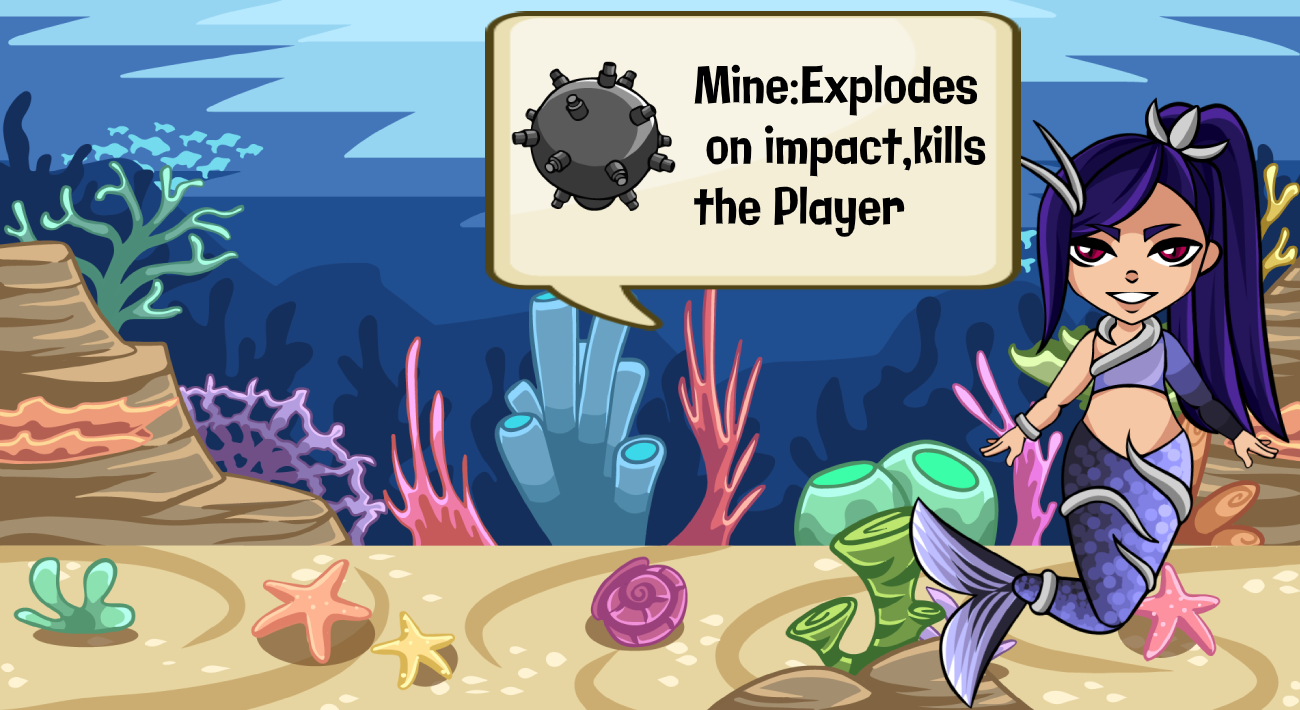
<style>
.page{position:relative;width:1300px;height:710px}
.page>*{position:absolute;margin:0}
.t1{font:50.5px "Galindo-Regular";color:#000000;scale:0.76 1}
</style>
<div class="page">
<p class="t1" style="left:694px;top:64px;width:292px;height:173px">Mine:Explodes  <br> on impact,kills<br>the Player</p>
</div>
